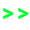
<style>
.page{position:relative;width:30px;height:30px;background:#ffffff}
.page>*{position:absolute;margin:0}
.t1{font:19px "MicrosoftYaHei-Bold";color:#00ff33;font-weight:bold}
</style>
<div class="page">
<p class="t1" style="left:3px;top:8px;width:26px;height:11px">&gt;&gt;</p>
</div>
